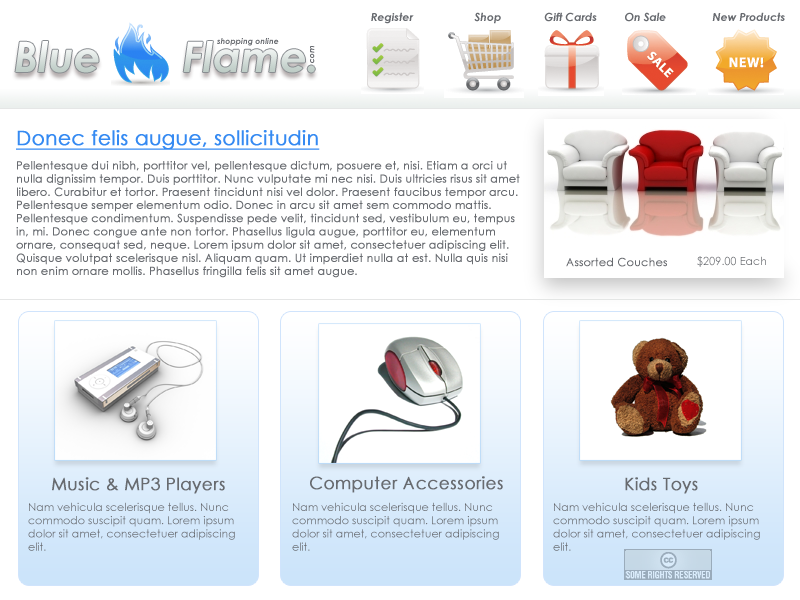
<style>
.page{position:relative;width:800px;height:600px;background:#ffffff}
.page>*{position:absolute;margin:0}
.t1{font:11px "CenturyGothic-BoldItalic";color:#686b70}
.t2{font:8px "CenturyGothic-BoldItalic";color:#686b70}
.t3{font:20px "CenturyGothic";color:#358af2;font-weight:bold;text-decoration:underline}
.t4{font:11px "CenturyGothic";color:#686b70;font-weight:bold}
.t5{font:11px "CenturyGothic";color:#686b70}
.t6{font:17px "CenturyGothic";color:#686b70;font-weight:bold}
</style>
<div class="page">
<p class="t1" style="left:371px;top:12px;width:414px;height:12px">Register                    Shop              Gift Cards         On Sale               New Products</p>
<p class="t2" style="left:217px;top:38px;width:62px;height:8px">shopping online</p>
<p class="t2" style="left:310px;top:46px;width:5px;height:17px;rotate:-90deg">com</p>
<p class="t3" style="left:16px;top:130px;width:304px;height:20px">Donec felis augue, sollicitudin</p>
<p class="t4" style="left:16px;top:161px;width:504px;height:117px">Pellentesque dui nibh, porttitor vel, pellentesque dictum, posuere et, nisi. Etiam a orci ut nulla dignissim tempor. Duis porttitor. Nunc vulputate mi nec nisi. Duis ultricies risus sit amet libero. Curabitur et tortor. Praesent tincidunt nisi vel dolor. Praesent faucibus tempor arcu. Pellentesque semper elementum odio. Donec in arcu sit amet sem commodo mattis. Pellentesque condimentum. Suspendisse pede velit, tincidunt sed, vestibulum eu, tempus in, mi. Donec congue ante non tortor. Phasellus ligula augue, porttitor eu, elementum ornare, consequat sed, neque. Lorem ipsum dolor sit amet, consectetuer adipiscing elit. Quisque volutpat scelerisque nisl. Aliquam quam. Ut imperdiet nulla at est. Nulla quis nisi non enim ornare mollis. Phasellus fringilla felis sit amet augue.</p>
<p class="t4" style="left:566px;top:257px;width:101px;height:10px">Assorted Couches</p>
<p class="t5" style="left:697px;top:256px;width:69px;height:11px">$209.00 Each</p>
<p class="t6" style="left:52px;top:477px;width:173px;height:17px">Music &amp; MP3 Players</p>
<p class="t6" style="left:310px;top:476px;width:193px;height:17px">Computer Accessories</p>
<p class="t6" style="left:625px;top:477px;width:73px;height:17px">Kids Toys</p>
<p class="t5" style="left:28px;top:502px;width:207px;height:49px">Nam vehicula scelerisque tellus. Nunc commodo suscipit quam. Lorem ipsum dolor sit amet, consectetuer adipiscing elit.</p>
<p class="t5" style="left:292px;top:502px;width:207px;height:49px">Nam vehicula scelerisque tellus. Nunc commodo suscipit quam. Lorem ipsum dolor sit amet, consectetuer adipiscing elit.</p>
<p class="t5" style="left:553px;top:502px;width:207px;height:49px">Nam vehicula scelerisque tellus. Nunc commodo suscipit quam. Lorem ipsum dolor sit amet, consectetuer adipiscing elit.</p>
</div>
